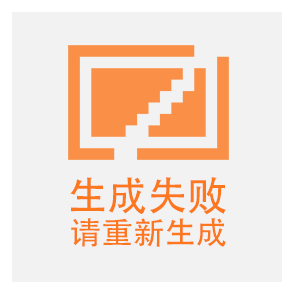
<style>
.page{position:relative;width:294px;height:294px;background:#f2f2f2}
.page>*{position:absolute;margin:0}
.t1{font:40px "STHeiti";color:#fc771d}
.t2{font:31.1px "STHeiti";color:#fc771d}
</style>
<div class="page">
<p class="t1" style="left:70px;top:177px;width:156px;height:38px">生成失败</p>
<p class="t2" style="left:71px;top:218px;width:155px;height:29px">请重新生成</p>
</div>
